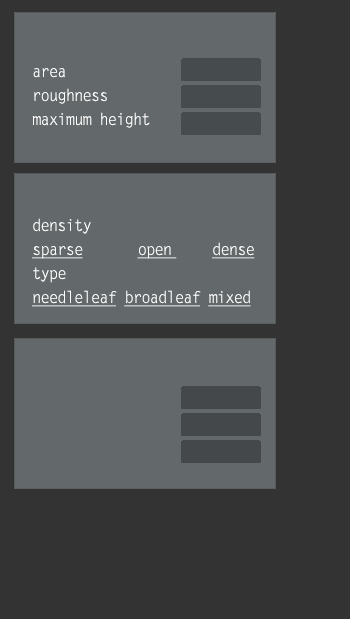
<style>
.page{position:relative;width:350px;height:619px;background:#63696b}
.page>*{position:absolute;margin:0}
.t1{font:16px "LetterGothicStd";letter-spacing:-0.075em;color:#ffffff}
.t2{font:16px "LetterGothicStd";letter-spacing:-0.075em;color:#ffffff;text-decoration:underline}
</style>
<div class="page">
<p class="t1" style="left:32px;top:68px;width:118px;height:60px">area<br>roughness<br>maximum height</p>
<p class="t2" style="left:32px;top:218px;width:223px;height:89px"><span class="t1">density<br></span>sparse     open  dense<br><span class="t1">type<br></span>needleleaf broadleaf mixed<span class="t1"> <br><br> broadleaf</span></p>
</div>
